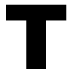
<style>
.page{position:relative;width:72px;height:72px;background:#ffffff}
.page>*{position:absolute;margin:0}
.t1{font:89.7px "Arial-Black";color:#000000}
</style>
<div class="page">
<p class="t1" style="left:6px;top:4px;width:61px;height:65px">T</p>
</div>
